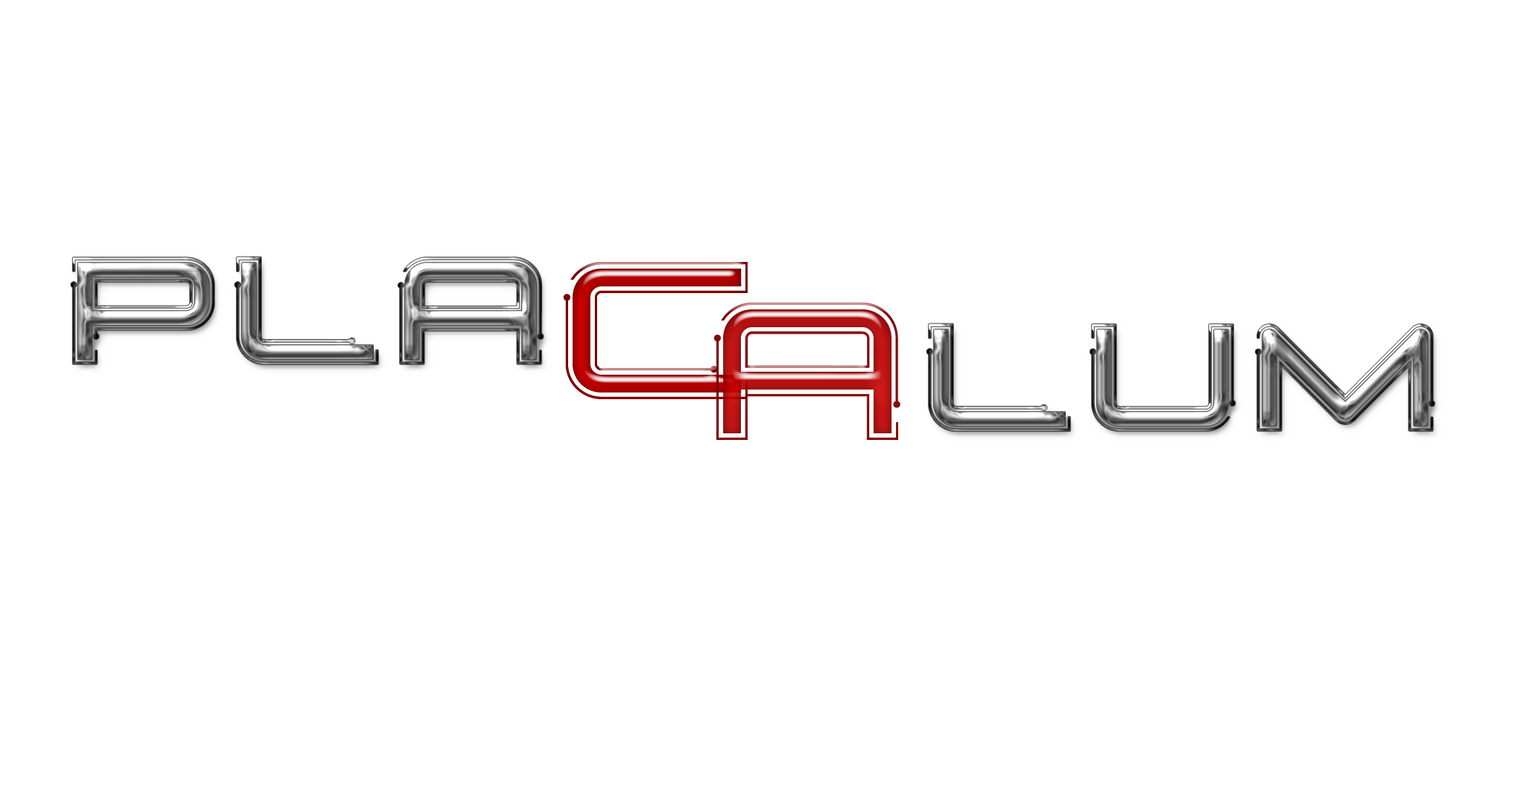
<style>
.page{position:relative;width:1519px;height:785px;background:#ffffff}
.page>*{position:absolute;margin:0}
.t1{font:138.5px "SimpleTechBold02"}
.t2{font:178px "SimpleTechBold02"}
</style>
<div class="page">
<p class="t1" style="left:71px;top:257px;width:473px;height:107px">pla</p>
<p class="t2" style="left:563px;top:262px;width:185px;height:137px">c</p>
<p class="t2" style="left:714px;top:302px;width:187px;height:138px">A</p>
<p class="t1" style="left:927px;top:323px;width:508px;height:108px">lum</p>
</div>
